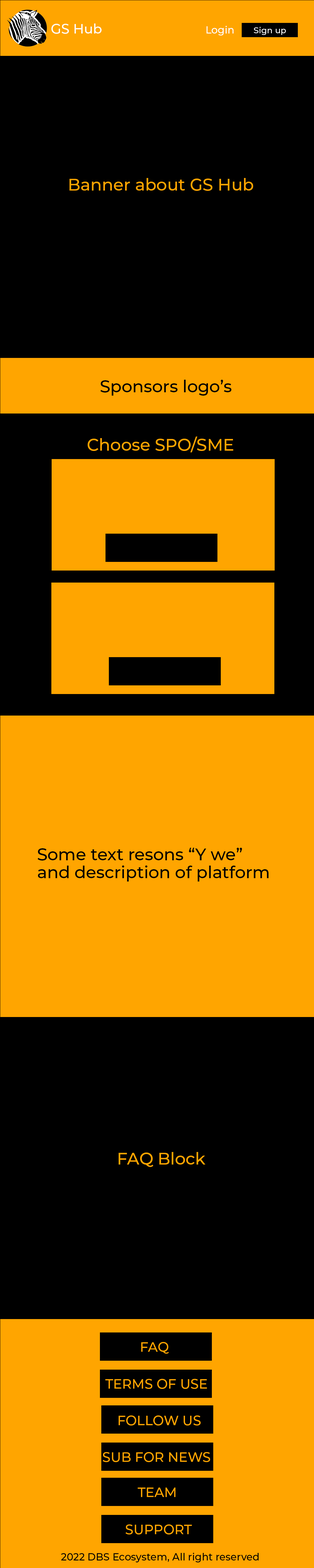
<style>
.page{position:relative;width:314px;height:1568px;background:#000000}
.page>*{position:absolute;margin:0}
.t1{font:13.4px "Montserrat-Medium";color:#ffffff}
.t2{font:10.1px "Montserrat-Medium";color:#ffffff}
.t3{font:8.4px "Montserrat-Medium";color:#ffffff}
.t4{font:16.8px "Montserrat-Medium";color:#ffa500}
.t5{font:16.8px "Montserrat-Medium";color:#000000}
.t6{font:16.8px/4.5px "Montserrat-Medium";color:#000000}
.t7{font:13.4px "Montserrat-Medium";color:#ffa500}
.t8{font:10.1px "Montserrat-Medium";color:#000000}
</style>
<div class="page">
<p class="t1" style="left:51px;top:23px;width:51px;height:11px">GS Hub</p>
<p class="t2" style="left:207px;top:26px;width:27px;height:9px">Login</p>
<p class="t3" style="left:254px;top:27px;width:32px;height:8px">Sign up</p>
<p class="t4" style="left:70px;top:178px;width:183px;height:13px">Banner about GS Hub</p>
<p class="t5" style="left:101px;top:380px;width:131px;height:16px">Sponsors logo’s</p>
<p class="t4" style="left:88px;top:436px;width:146px;height:16px">Choose SPO/SME</p>
<p class="t6" style="left:38px;top:848px;width:231px;height:34px;text-align:justify">Some text resons “Y we” <br><br><br><br>and description of platform</p>
<p class="t4" style="left:119px;top:1152px;width:87px;height:15px">FAQ Block</p>
<p class="t7" style="left:141px;top:1342px;width:28px;height:12px">FAQ</p>
<p class="t7" style="left:105px;top:1379px;width:102px;height:10px">TERMS OF USE</p>
<p class="t7" style="left:119px;top:1415px;width:82px;height:11px">FOLLOW US</p>
<p class="t7" style="left:103px;top:1452px;width:107px;height:10px">SUB FOR NEWS</p>
<p class="t7" style="left:138px;top:1488px;width:38px;height:9px">TEAM</p>
<p class="t7" style="left:126px;top:1524px;width:66px;height:10px">SUPPORT</p>
<p class="t8" style="left:61px;top:1553px;width:198px;height:9px">2022 DBS Ecosystem, All right reserved</p>
</div>
